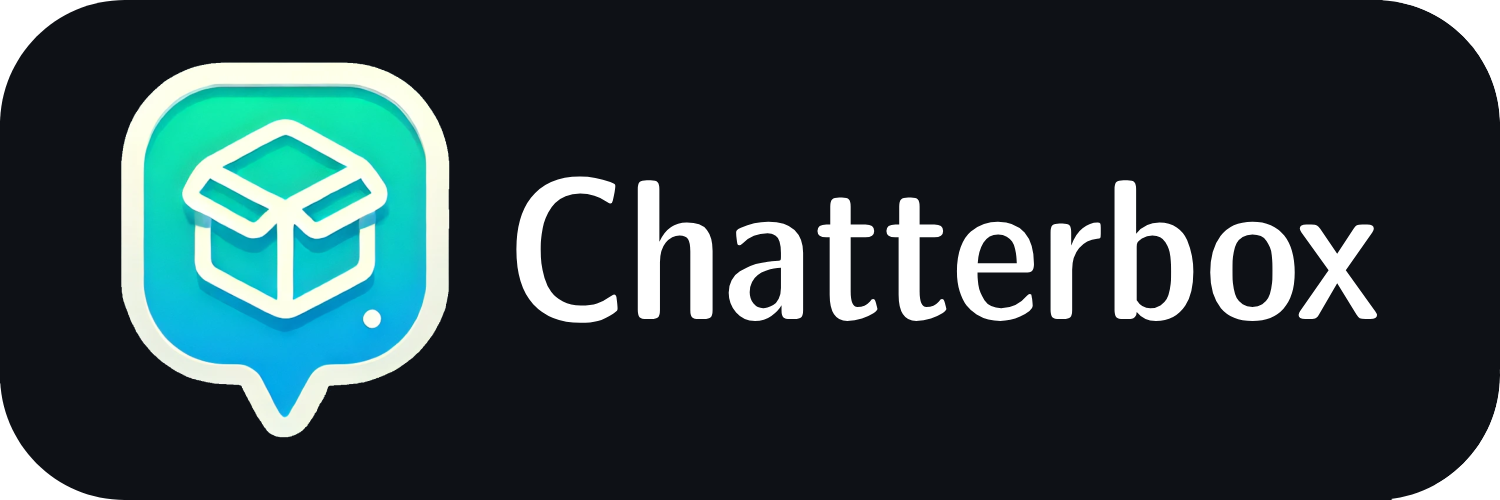
<style>
.page{position:relative;width:1500px;height:500px;background:#0e1116}
.page>*{position:absolute;margin:0}
.t1{font:200px "CMUSansSerif-DemiCondensed";color:#ffffff}
</style>
<div class="page">
<p class="t1" style="left:516px;top:176px;width:862px;height:147px">Chatterbox</p>
</div>
